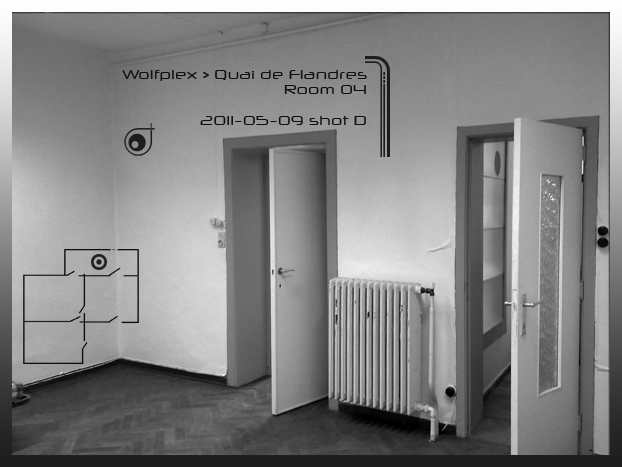
<style>
.page{position:relative;width:622px;height:467px}
.page>*{position:absolute;margin:0}
.t1{font:13px "NeuropolXFree";color:#101010}
</style>
<div class="page">
<p class="t1" style="left:122px;top:70px;width:245px;height:55px;text-align:right">Wolfplex &gt; Quai de Flandres<br>Room 04<br><br>2011-05-09 shot D</p>
</div>
